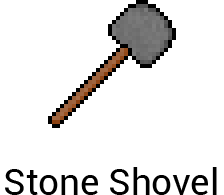
<style>
.page{position:relative;width:224px;height:195px;background:#ffffff}
.page>*{position:absolute;margin:0}
.t1{font:36.7px "Roboto-Regular";color:#000000}
</style>
<div class="page">
<p class="t1" style="left:5px;top:167px;width:212px;height:28px">Stone Shovel</p>
</div>
